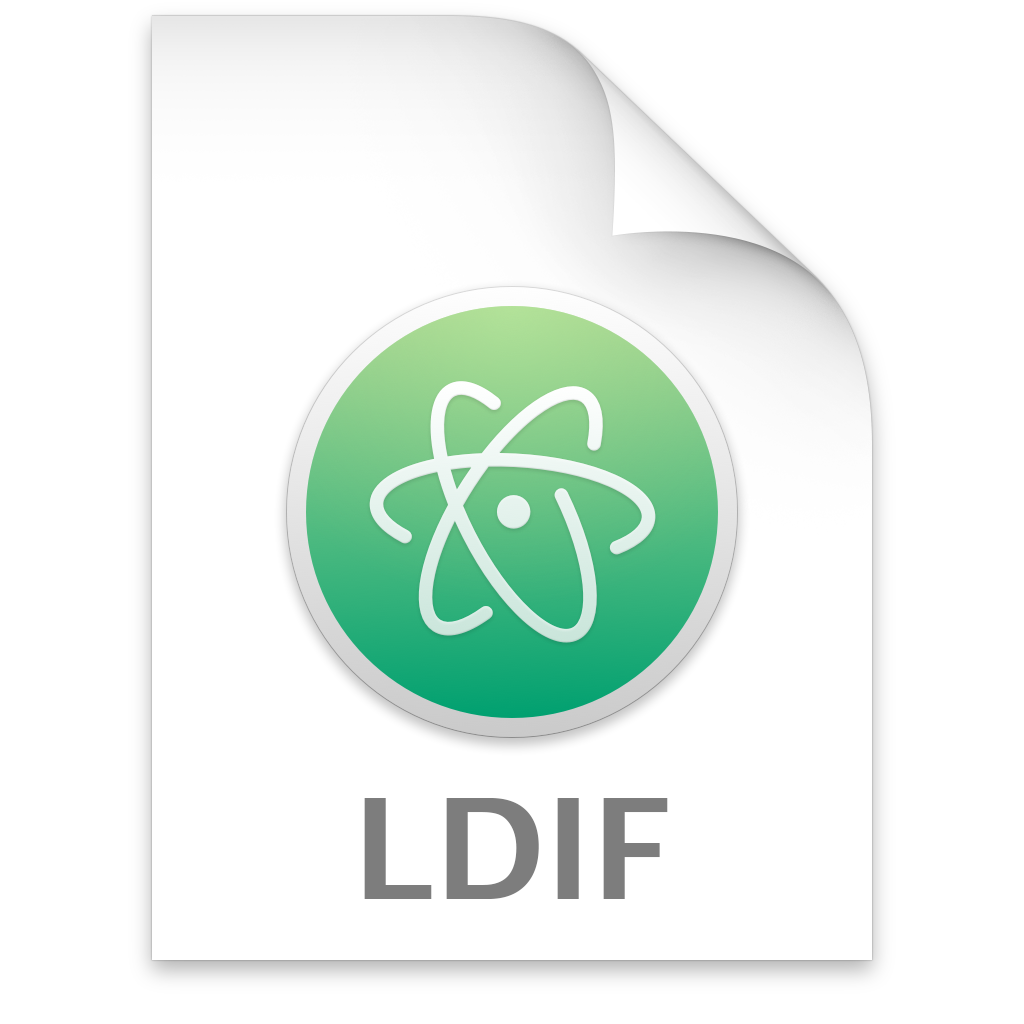
<style>
.page{position:relative;width:1024px;height:1024px;background:#ffffff}
.page>*{position:absolute;margin:0}
.t1{font:140px "LucidaGrande-Bold";color:#7d7d7d}
</style>
<div class="page">
<p class="t1" style="left:364px;top:798px;width:304px;height:101px">LDIF</p>
</div>
